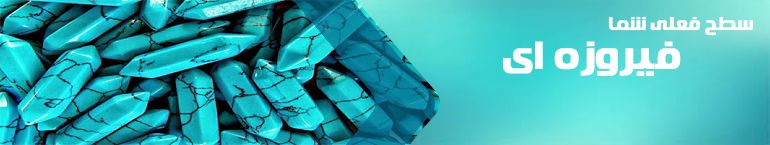
<style>
.page{position:relative;width:770px;height:145px}
.page>*{position:absolute;margin:0}
.t1{font:18.4px "FarFanni";color:#ffffff}
.t2{font:39.2px "FarFanni";color:#ffffff}
</style>
<div class="page">
<p class="t1" style="left:608px;top:16px;width:146px;height:20px">سطح فعلی شما</p>
<p class="t2" style="left:503px;top:41px;width:178px;height:35px">فیروزه ای</p>
</div>
